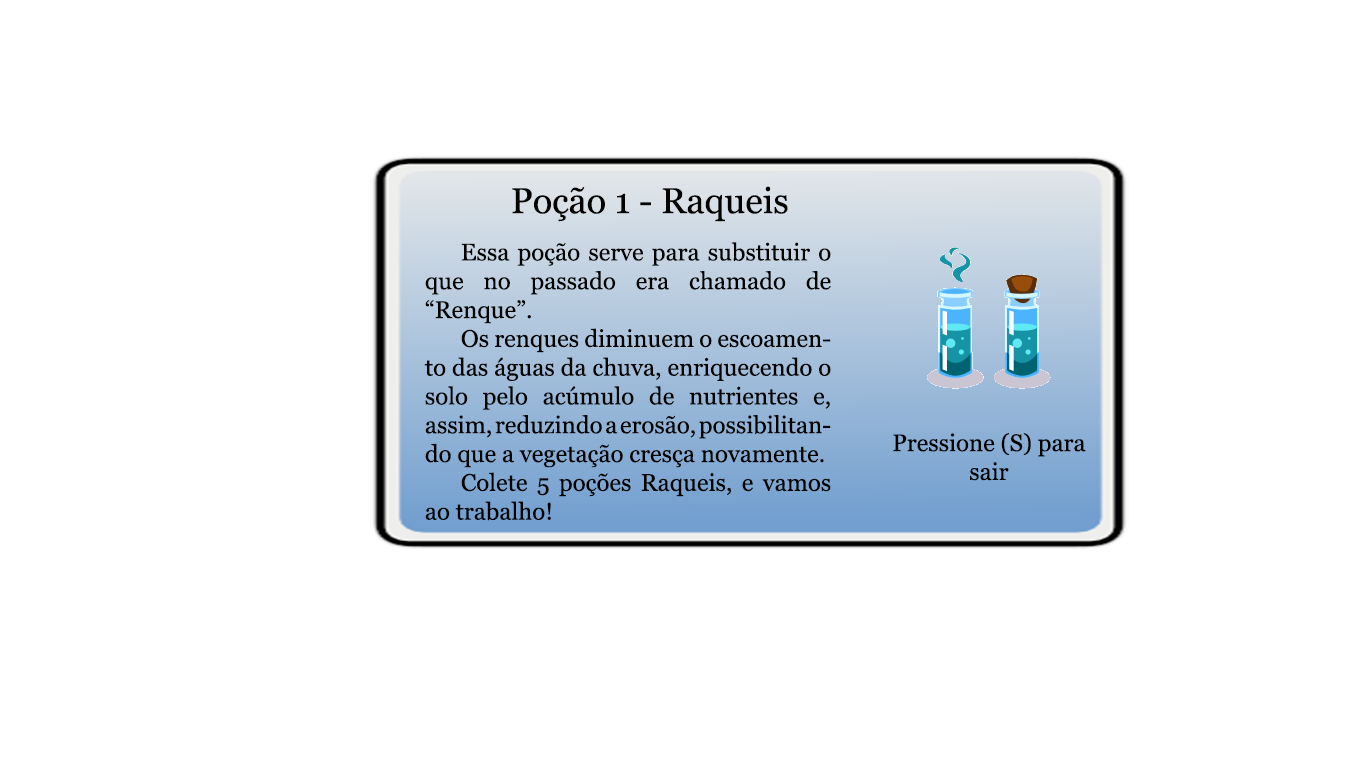
<style>
.page{position:relative;width:1366px;height:768px;background:#ffffff}
.page>*{position:absolute;margin:0}
.t1{font:36px "Georgia";color:#010200}
.t2{font:24px "Georgia";color:#010200}
</style>
<div class="page">
<p class="t1" style="left:512px;top:186px;width:276px;height:36px">Poção 1 - Raqueis</p>
<p class="t2" style="left:424px;top:242px;width:407px;height:279px;text-align:justify">Essa poção serve para substituir o que no passado era chamado de “Renque”.<br> Os renques diminuem o escoamento das águas da chuva, enriquecendo o solo pelo acúmulo de nutrientes e, assim, reduzindo a erosão, possibilitando que a vegetação cresça novamente.<br> Colete 5 poções Raqueis, e vamos ao trabalho!</p>
<p class="t2" style="left:893px;top:433px;width:193px;height:48px;text-align:center">Pressione (S) para sair</p>
</div>
